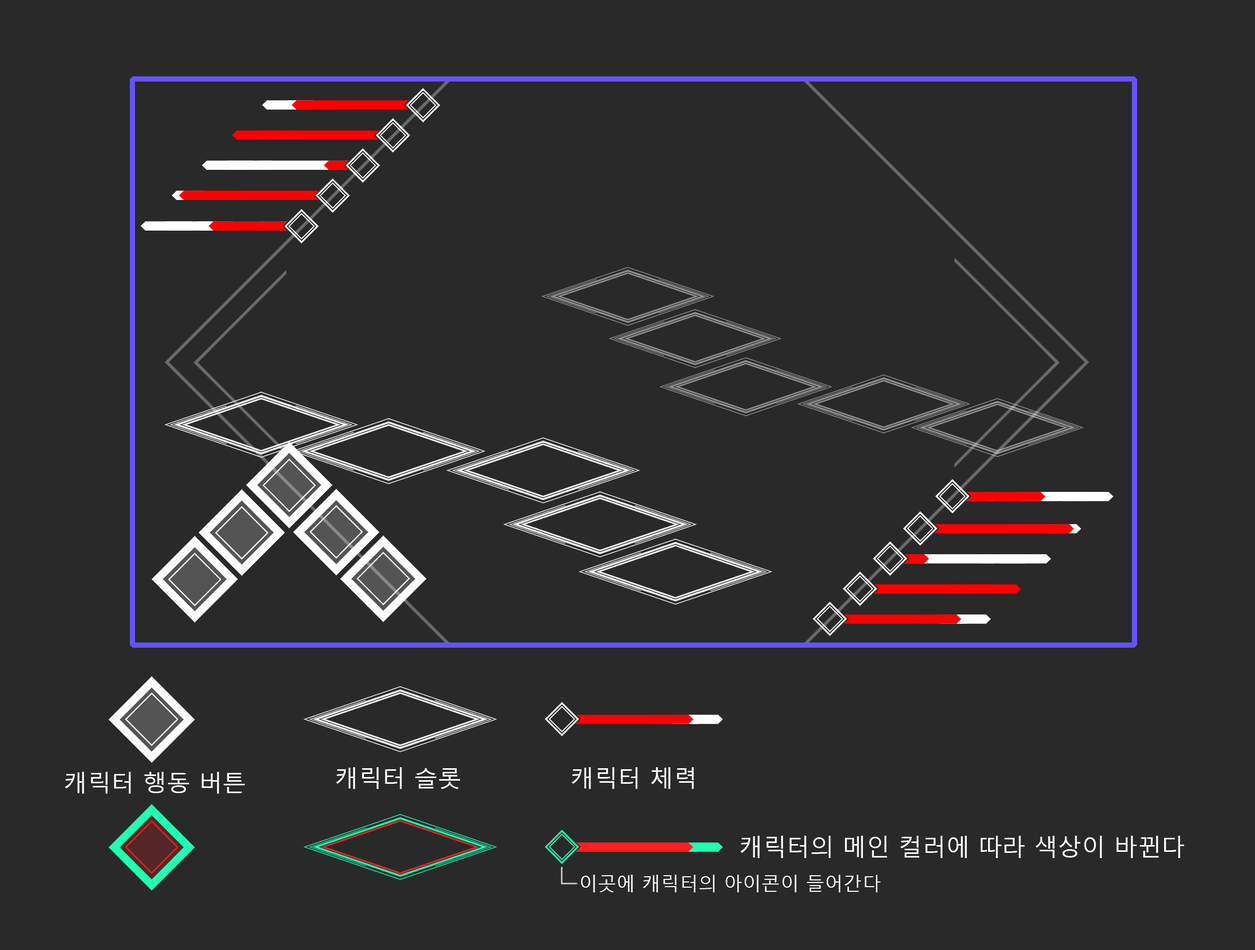
<style>
.page{position:relative;width:1255px;height:950px;background:#292929}
.page>*{position:absolute;margin:0}
.t1{font:22.8px "MalgunGothic";color:#ffffff;scale:1.04 1}
.t2{font:23.8px "MalgunGothic";color:#ffffff}
.t3{font:18.8px "MalgunGothic";color:#ffffff}
</style>
<div class="page">
<p class="t1" style="left:65px;top:772px;width:180px;height:22px">캐릭터 행동 버튼</p>
<p class="t1" style="left:336px;top:767px;width:124px;height:22px">캐릭터 슬롯</p>
<p class="t1" style="left:572px;top:767px;width:122px;height:22px">캐릭터 체력</p>
<p class="t2" style="left:741px;top:836px;width:444px;height:22px">캐릭터의 메인 컬러에 따라 색상이 바뀐다</p>
<p class="t3" style="left:581px;top:875px;width:300px;height:17px">이곳에 캐릭터의 아이콘이 들어간다</p>
</div>
